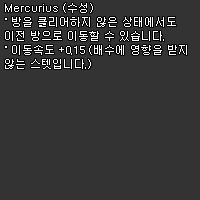
<style>
.page{position:relative;width:200px;height:200px;background:#333333}
.page>*{position:absolute;margin:0}
.t1{font:11px/14px "Dotum";color:#ffffff}
</style>
<div class="page">
<p class="t1" style="left:5px;top:3px;width:182px;height:66px">Mercurius (수성)<br>˚ 방을 클리어하지 않은 상태에서도<br>이전 방으로 이동할 수 있습니다.<br>˚ 이동속도 +0.15 (배수에 영향을 받지<br>않는 스텟입니다.)</p>
</div>
